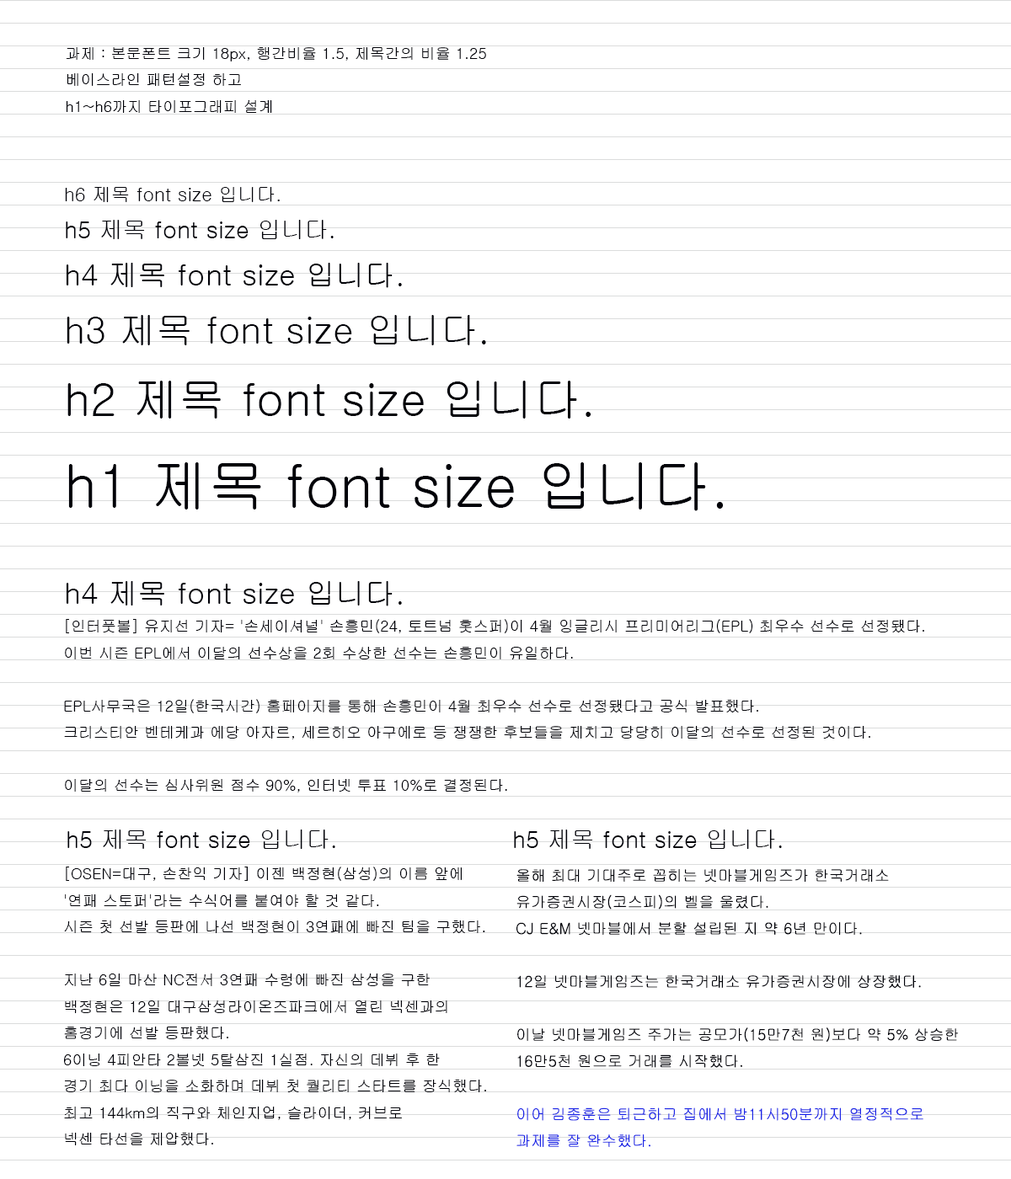
<style>
.page{position:relative;width:1011px;height:1179px;background:#ffffff}
.page>*{position:absolute;margin:0}
.t1{font:15.2px "Gulim";color:#000108}
.t2{font:19px "Gulim";color:#000108}
.t3{font:23.7px "Gulim";color:#000108}
.t4{font:29.7px "Gulim";color:#000108}
.t5{font:37.1px "Gulim";color:#000108}
.t6{font:46.3px "Gulim";color:#000108}
.t7{font:58px "Gulim";color:#000108}
.t8{font:15.2px "Gulim";color:#1b25e6}
</style>
<div class="page">
<p class="t1" style="left:66px;top:47px;width:420px;height:66px">과제 : 본문폰트 크기 18px, 행간비율 1.5, 제목간의 비율 1.25<br>베이스라인 패턴설정 하고<br>h1~h6까지 타이포그래피 설계</p>
<p class="t2" style="left:65px;top:187px;width:659px;height:324px">h6 제목 font size 입니다.<br><span class="t3">h5 제목 font size 입니다.<br></span><span class="t4">h4 제목 font size 입니다.<br></span><span class="t5">h3 제목 font size 입니다.<br></span><span class="t6">h2 제목 font size 입니다.<br></span><span class="t7">h1 제목 font size 입니다.</span></p>
<p class="t4" style="left:66px;top:581px;width:336px;height:26px">h4 제목 font size 입니다.</p>
<p class="t1" style="left:64px;top:619px;width:860px;height:174px">[인터풋볼] 유지선 기자= '손세이셔널' 손흥민(24, 토트넘 홋스퍼)이 4월 잉글리시 프리미어리그(EPL) 최우수 선수로 선정됐다. <br>이번 시즌 EPL에서 이달의 선수상을 2회 수상한 선수는 손흥민이 유일하다. <br><br>EPL사무국은 12일(한국시간) 홈페이지를 통해 손흥민이 4월 최우수 선수로 선정됐다고 공식 발표했다. <br>크리스티안 벤테케과 에당 아자르, 세르히오 아구에로 등 쟁쟁한 후보들을 제치고 당당히 이달의 선수로 선정된 것이다.<br><br>이달의 선수는 심사위원 점수 90%, 인터넷 투표 10%로 결정된다.</p>
<p class="t3" style="left:67px;top:830px;width:268px;height:19px">h5 제목 font size 입니다.</p>
<p class="t3" style="left:514px;top:830px;width:268px;height:19px">h5 제목 font size 입니다.</p>
<p class="t1" style="left:64px;top:867px;width:422px;height:279px">[OSEN=대구, 손찬익 기자] 이젠 백정현(삼성)의 이름 앞에 <br>'연패 스토퍼'라는 수식어를 붙여야 할 것 같다. <br>시즌 첫 선발 등판에 나선 백정현이 3연패에 빠진 팀을 구했다. <br><br>지난 6일 마산 NC전서 3연패 수렁에 빠진 삼성을 구한 <br>백정현은 12일 대구삼성라이온즈파크에서 열린 넥센과의 <br>홈경기에 선발 등판했다. <br>6이닝 4피안타 2볼넷 5탈삼진 1실점. 자신의 데뷔 후 한 <br>경기 최다 이닝을 소화하며 데뷔 첫 퀄리티 스타트를 장식했다. <br>최고 144km의 직구와 체인지업, 슬라이더, 커브로 <br>넥센 타선을 제압했다.</p>
<p class="t1" style="left:516px;top:869px;width:443px;height:279px">올해 최대 기대주로 꼽히는 넷마블게임즈가 한국거래소 <br>유가증권시장(코스피)의 벨을 울렸다. <br>CJ E&amp;M 넷마블에서 분할 설립된 지 약 6년 만이다.<br>​<br>12일 넷마블게임즈는 한국거래소 유가증권시장에 상장했다.<br>​<br>이날 넷마블게임즈 주가는 공모가(15만7천 원)보다 약 5% 상승한 <br>16만5천 원으로 거래를 시작했다.<br><br><span class="t8">이어 김종훈은 퇴근하고 집에서 밤11시50분까지 열정적으로<br>과제를 잘 완수했다.</span></p>
</div>
